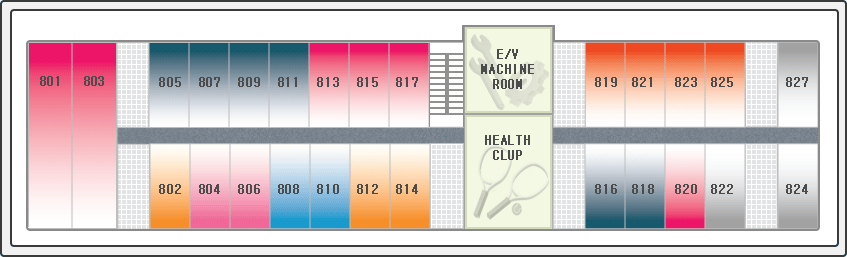
<style>
.page{position:relative;width:847px;height:257px;background:#ffffff}
.page>*{position:absolute;margin:0}
.t1{font:12px/15px "GulimChe";letter-spacing:0.075em;color:#4c4c4c;font-weight:bold}
.t2{font:12px "GulimChe";letter-spacing:0.025em;color:#4c4c4c;font-weight:bold}
.t3{font:12px "GulimChe";letter-spacing:0.075em;color:#4c4c4c;font-weight:bold}
</style>
<div class="page">
<p class="t1" style="left:481px;top:49px;width:53px;height:40px;text-align:center">E/V<br>MACHINE<br>ROOM</p>
<p class="t2" style="left:40px;top:76px;width:64px;height:10px">801  803</p>
<p class="t3" style="left:159px;top:77px;width:259px;height:10px">805  807  809  811  813  815  817</p>
<p class="t3" style="left:595px;top:77px;width:213px;height:10px">819 821  823  825       827</p>
<p class="t1" style="left:485px;top:135px;width:45px;height:25px;text-align:center">HEALTH<br>CLUP</p>
<p class="t3" style="left:159px;top:184px;width:259px;height:10px">802  804  806  808  810  812  814</p>
<p class="t3" style="left:595px;top:184px;width:213px;height:10px">816 818  820  822       824</p>
</div>
